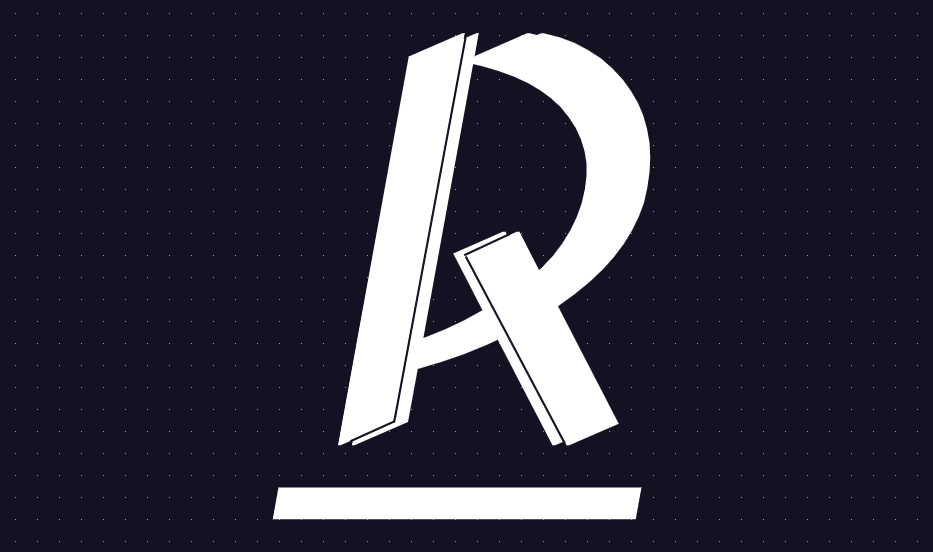
<style>
.page{position:relative;width:933px;height:552px;background:#161122}
.page>*{position:absolute;margin:0}
.t1{font:530.9px "NovaCut";color:#ffffff;font-weight:bold;font-style:italic;text-decoration:underline}
</style>
<div class="page">
<p class="t1" style="left:272px;top:33px;width:379px;height:487px">R</p>
</div>
